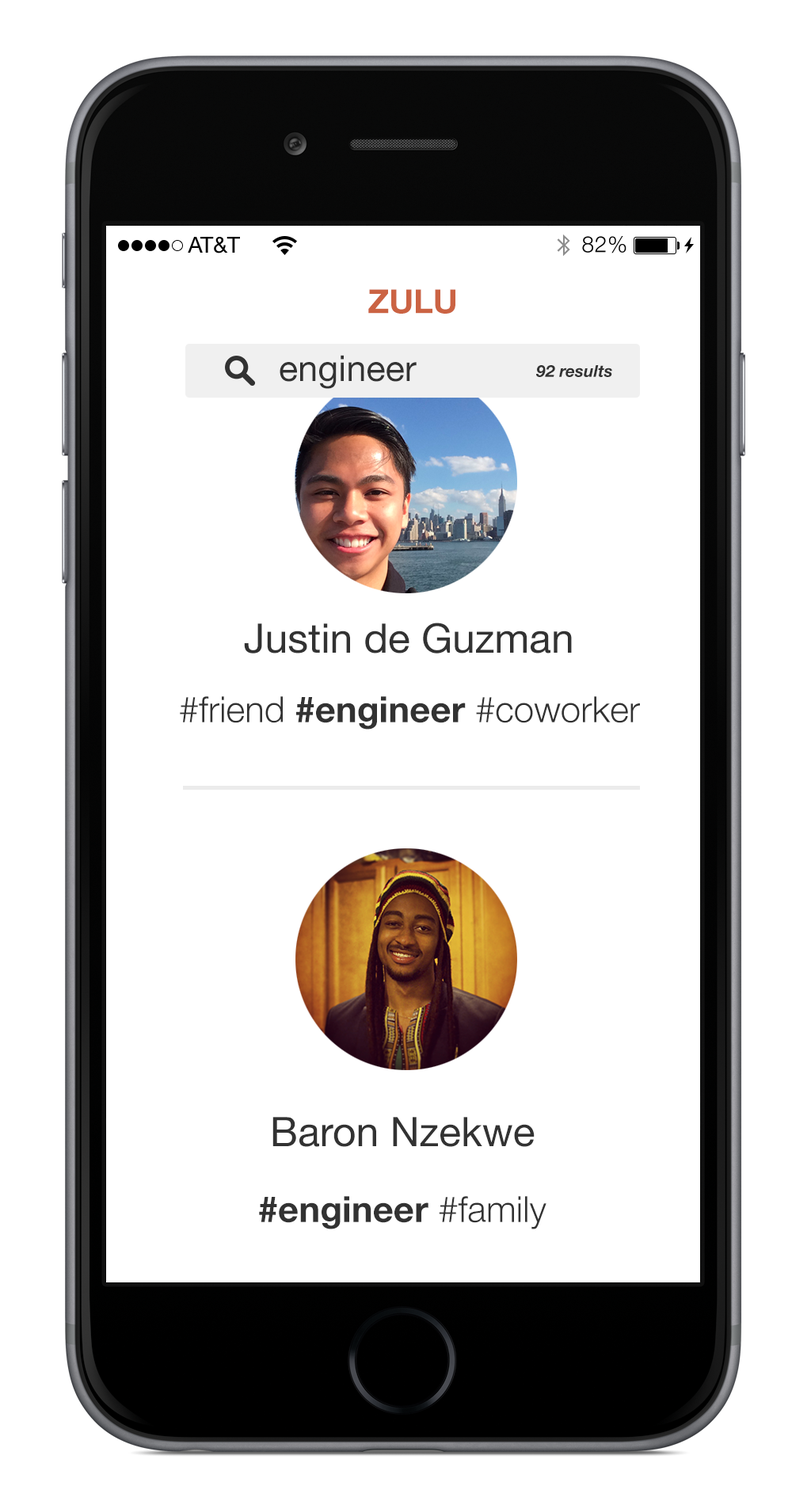
<style>
.page{position:relative;width:792px;height:1505px;background:#ffffff}
.page>*{position:absolute;margin:0}
.t1{font:22.2px "HelveticaNeue";color:#000000;text-transform:uppercase}
.t2{font:22.2px "HelveticaNeue-Light";letter-spacing:0.025em;color:#000000}
.t3{font:33px "HelveticaNeue-Bold";color:#cb6343}
.t4{font:35.8px "HelveticaNeue";color:#323232}
.t5{font:16.5px "HelveticaNeue-BoldItalic";color:#323232}
.t6{font:40.8px "HelveticaNeue";color:#323232}
.t7{font:36px "HelveticaNeue-Bold";color:#323232}
.t8{font:36px "HelveticaNeue-Light";color:#323232}
</style>
<div class="page">
<p class="t1" style="left:188px;top:237px;width:52px;height:17px">AT&amp;T</p>
<p class="t2" style="left:582px;top:236px;width:45px;height:18px">82%</p>
<p class="t3" style="left:368px;top:289px;width:88px;height:25px">ZULU</p>
<p class="t4" style="left:280px;top:355px;width:137px;height:34px">engineer</p>
<p class="t5" style="left:536px;top:365px;width:76px;height:12px">92 results</p>
<p class="t6" style="left:244px;top:623px;width:328px;height:31px">Justin de Guzman</p>
<p class="t7" style="left:180px;top:696px;width:460px;height:34px"><span class="t8">#friend </span>#engineer<span class="t8"> #coworker</span></p>
<p class="t6" style="left:273px;top:1117px;width:262px;height:30px">Baron Nzekwe</p>
<p class="t7" style="left:259px;top:1196px;width:288px;height:34px">#engineer<span class="t8"> #family</span></p>
</div>
